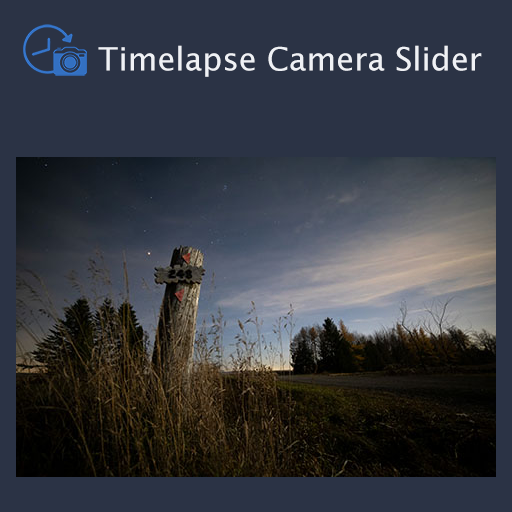
<style>
.page{position:relative;width:512px;height:512px;background:#2b3345}
.page>*{position:absolute;margin:0}
.t1{font:32px "LucidaSans";color:#f0f2f6}
</style>
<div class="page">
<p class="t1" style="left:98px;top:45px;width:384px;height:32px">Timelapse Camera Slider</p>
</div>
